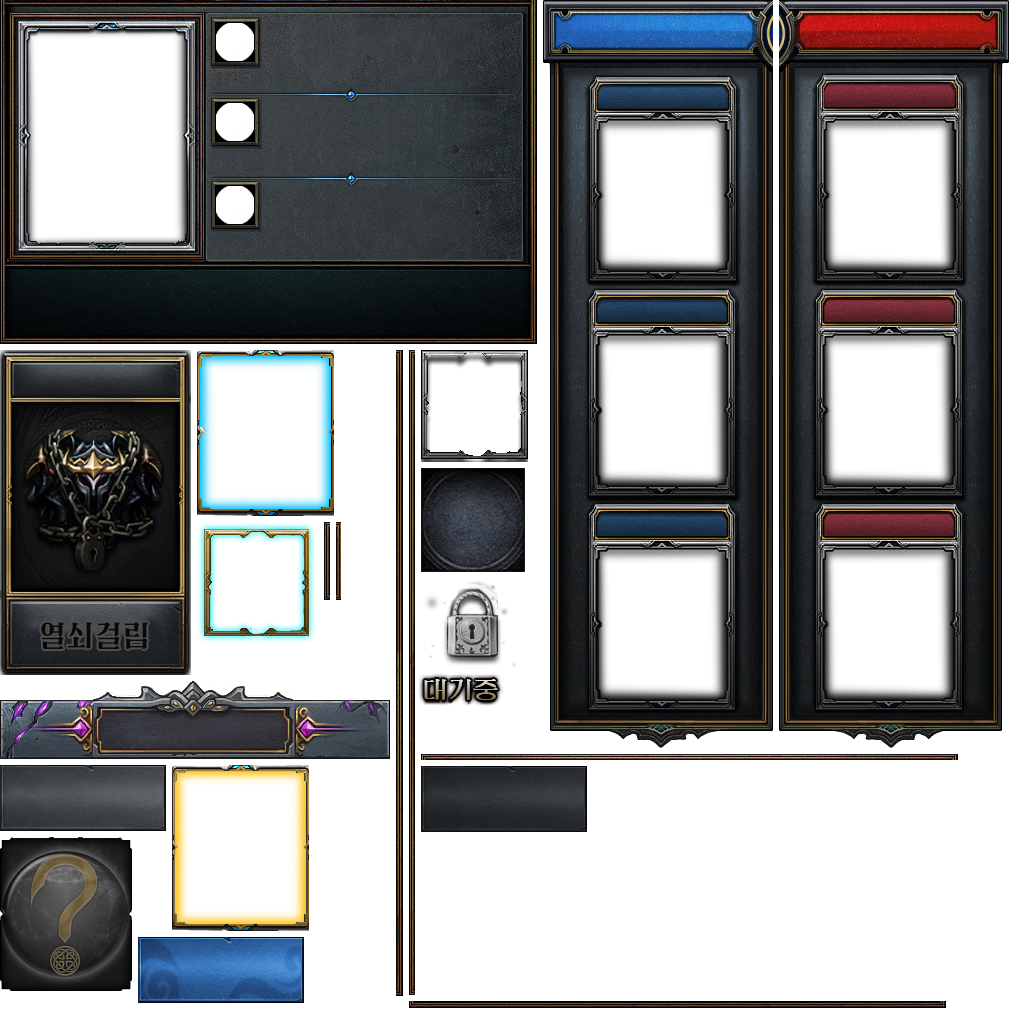
<style>
.page{position:relative;width:1024px;height:1024px;background:#ffffff}
.page>*{position:absolute;margin:0}
.t1{font:28px "PIC-TitleMyongjo-Bold-KP-97KPS";color:#090a08}
.t2{font:25px "PIC-Myongjo-Bold-KP-97KPS"}
</style>
<div class="page">
<p class="t1" style="left:41px;top:622px;width:107px;height:27px">열쇠걸림</p>
<p class="t2" style="left:424px;top:678px;width:74px;height:22px">대기중</p>
</div>
